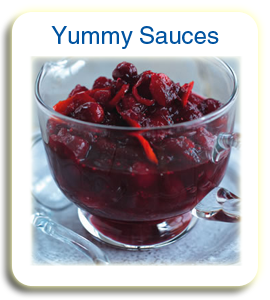
<style>
.page{position:relative;width:270px;height:300px;background:#ffffff}
.page>*{position:absolute;margin:0}
.t1{font:24px "HelveticaLTStd-Roman";color:#0053a0}
</style>
<div class="page">
<p class="t1" style="left:51px;top:26px;width:168px;height:23px">Yummy Sauces</p>
</div>
